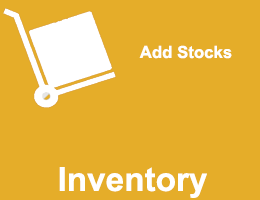
<style>
.page{position:relative;width:260px;height:200px;background:#e5ad29}
.page>*{position:absolute;margin:0}
.t1{font:16.8px "Arial-BoldMT";color:#ffffff}
.t2{font:33.3px "Arial-BoldMT";color:#ffffff}
</style>
<div class="page">
<p class="t1" style="left:139px;top:45px;width:93px;height:14px">Add Stocks</p>
<p class="t2" style="left:59px;top:167px;width:148px;height:31px">Inventory</p>
</div>
